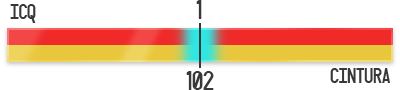
<style>
.page{position:relative;width:400px;height:90px;background:#ffffff}
.page>*{position:absolute;margin:0}
.t1{font:19px "Targa";color:#383838}
.t2{font:24px "Targa";color:#383838}
</style>
<div class="page">
<p class="t1" style="left:10px;top:4px;width:26px;height:19px">ICQ</p>
<p class="t2" style="left:196px;top:0px;width:6px;height:19px">1</p>
<p class="t2" style="left:186px;top:71px;width:28px;height:19px">102</p>
<p class="t1" style="left:330px;top:68px;width:60px;height:15px">CINTURA</p>
</div>
